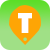
<style>
.page{position:relative;width:50px;height:50px;background:#a0e086}
.page>*{position:absolute;margin:0}
.t1{font:30px "Phosphate-Solid";color:#ffffff}
</style>
<div class="page">
<p class="t1" style="left:18px;top:13px;width:14px;height:20px">T</p>
</div>
